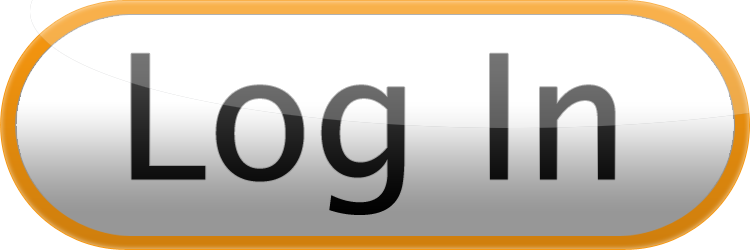
<style>
.page{position:relative;width:750px;height:250px;background:#ffffff}
.page>*{position:absolute;margin:0}
.t1{font:173.6px "LucidaSansUnicode"}
</style>
<div class="page">
<p class="t1" style="left:131px;top:53px;width:484px;height:162px">Log In</p>
</div>
